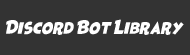
<style>
.page{position:relative;width:190px;height:55px;background:#333333}
.page>*{position:absolute;margin:0}
.t1{font:11px "HeroesLegend";color:#ffffff}
</style>
<div class="page">
<p class="t1" style="left:6px;top:19px;width:178px;height:16px">Discord Bot Library</p>
</div>
